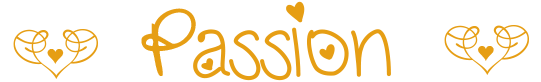
<style>
.page{position:relative;width:541px;height:82px;background:#ffffff}
.page>*{position:absolute;margin:0}
.t1{font:100px "LoveNess";color:#e69e14}
.t2{font:72px "StarsFromOurEyes";color:#e69e14}
.t3{font:100px "SoftOrnamentsFourteen";color:#e69e14}
.t4{font:30px "SoftOrnamentsFourteen";color:#e69e14}
</style>
<div class="page">
<p class="t1" style="left:141px;top:1px;width:250px;height:80px"><span class="t2">P</span>assion</p>
<p class="t3" style="left:13px;top:29px;width:85px;height:50px">X</p>
<p class="t3" style="left:444px;top:25px;width:85px;height:50px">X</p>
<p class="t4" style="left:47px;top:49px;width:17px;height:15px">5</p>
<p class="t4" style="left:478px;top:46px;width:16px;height:15px">5</p>
</div>
